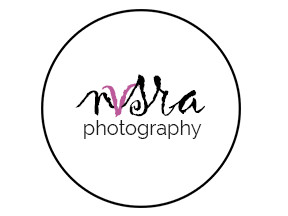
<style>
.page{position:relative;width:288px;height:216px;background:#ffffff}
.page>*{position:absolute;margin:0}
.t1{font:75px "Gigi-Regular";letter-spacing:-0.04em;color:#000000}
.t2{font:75px "Gigi-Regular";letter-spacing:-0.18em;color:#000000}
.t3{font:75px "Gigi-Regular";letter-spacing:-0.18em;color:#bc599b}
.t4{font:20px "Raleway-Regular";color:#1b1919}
</style>
<div class="page">
<p class="t1" style="left:75px;top:74px;width:130px;height:44px"><span class="t2">n</span><span class="t3">v</span>sra</p>
<p class="t4" style="left:84px;top:120px;width:118px;height:19px">photography</p>
</div>
